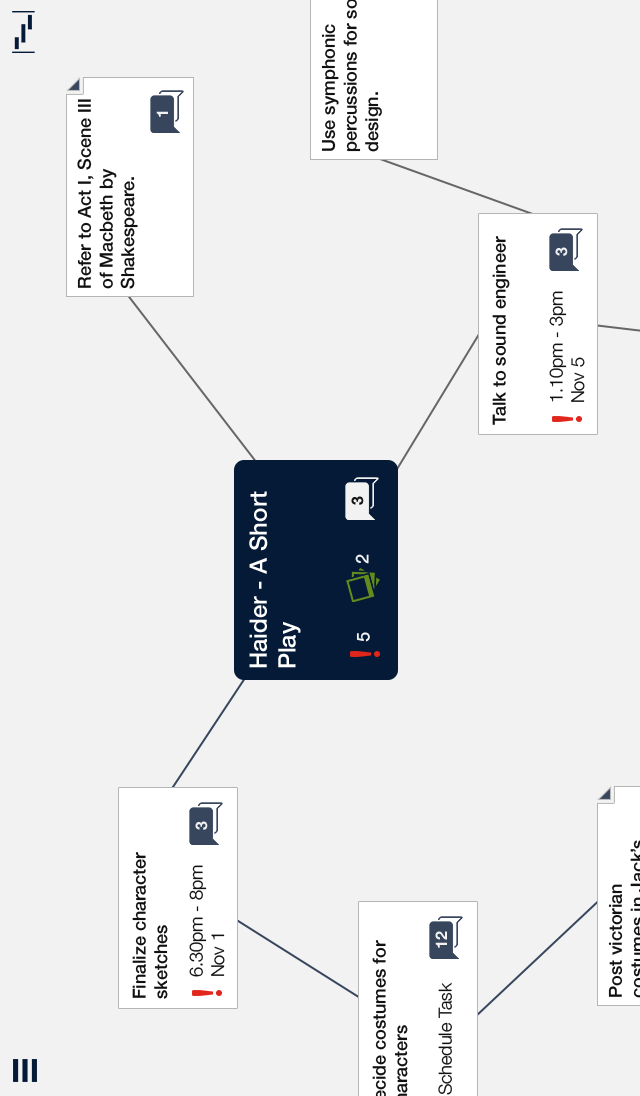
<style>
.page{position:relative;width:640px;height:1096px;background:#f2f2f2}
.page>*{position:absolute;margin:0}
.t1{font:18px "HelveticaNeue-Medium";color:#111111}
.t2{font:16px "HelveticaNeue-Bold";color:#f2f2f2}
.t3{font:18px "HelveticaNeue-Light";color:#111111}
.t4{font:24px "HelveticaNeue-Medium";color:#ffffff}
.t5{font:16px "HelveticaNeue-Bold";color:#111111}
.t6{font:18px "HelveticaNeue-Medium";color:#f2f2f2}
</style>
<div class="page">
<p class="t1" style="left:77px;top:99px;width:61px;height:190px;rotate:-90deg">Refer to Act I, Scene III of Macbeth by Shakespeare.</p>
<p class="t2" style="left:156px;top:111px;width:12px;height:6px;rotate:-90deg">1</p>
<p class="t1" style="left:492px;top:236px;width:18px;height:189px;rotate:-90deg">Talk to sound engineer</p>
<p class="t2" style="left:555px;top:247px;width:13px;height:9px;rotate:-90deg">3</p>
<p class="t3" style="left:549px;top:291px;width:36px;height:111px;rotate:-90deg">1.10pm - 3pm Nov 5</p>
<p class="t4" style="left:249px;top:491px;width:52px;height:177px;rotate:-90deg">Haider - A Short Play</p>
<p class="t5" style="left:351px;top:496px;width:13px;height:9px;rotate:-90deg">3</p>
<p class="t6" style="left:355px;top:554px;width:14px;height:10px;rotate:-90deg">2</p>
<p class="t6" style="left:356px;top:632px;width:14px;height:10px;rotate:-90deg">5</p>
<p class="t2" style="left:195px;top:821px;width:13px;height:9px;rotate:-90deg">3</p>
<p class="t1" style="left:132px;top:852px;width:36px;height:147px;rotate:-90deg">Finalize character sketches</p>
<p class="t3" style="left:189px;top:865px;width:36px;height:112px;rotate:-90deg">6.30pm - 8pm Nov 1</p>
<p class="t2" style="left:435px;top:931px;width:12px;height:17px;rotate:-90deg">12</p>
<p class="t3" style="left:438px;top:982px;width:14px;height:113px;rotate:-90deg">Schedule Task</p>
</div>
